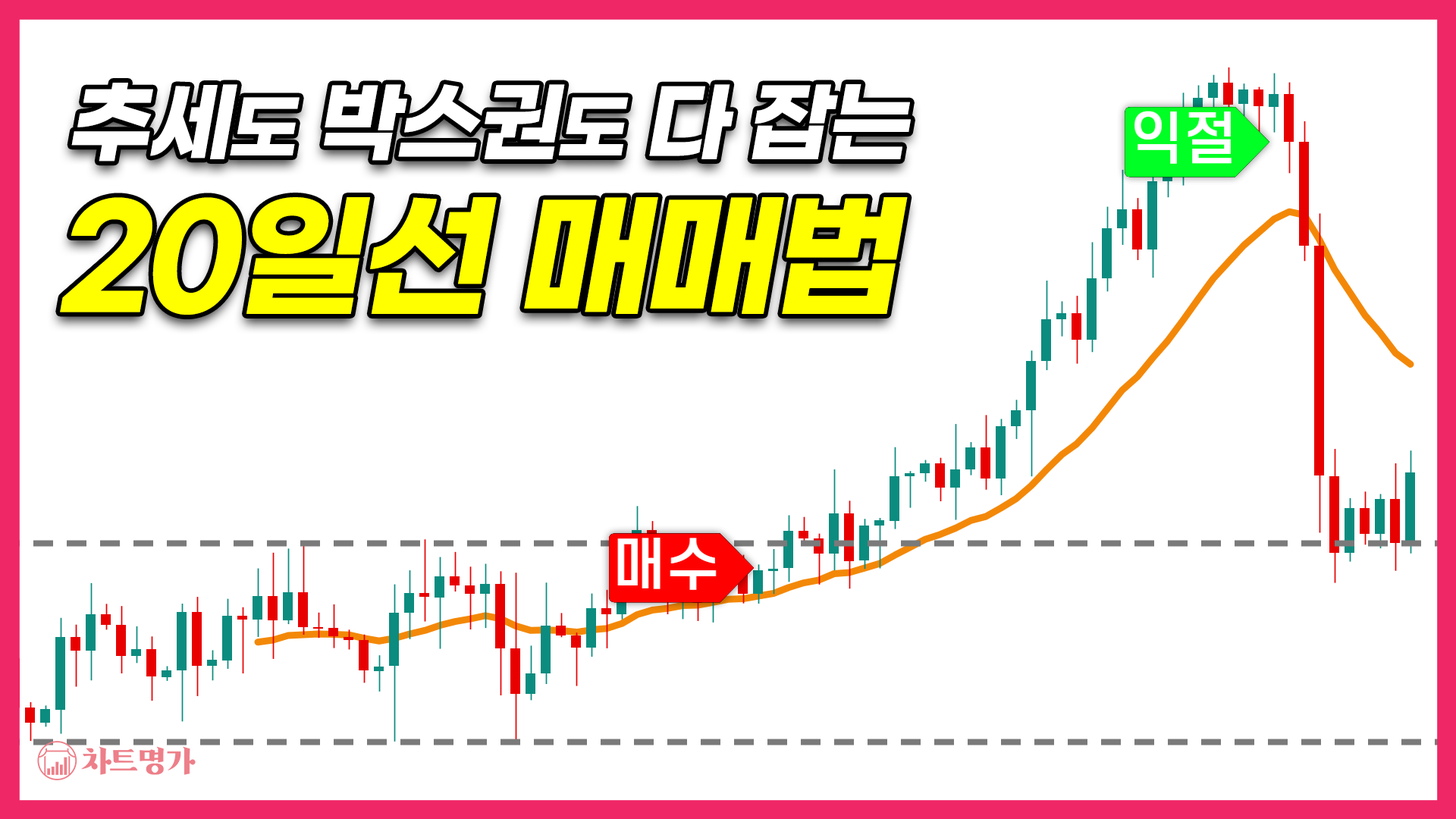
<style>
.page{position:relative;width:1456px;height:819px;background:#ffffff}
.page>*{position:absolute;margin:0}
.t1{font:87.3px "GmarketSansBold";letter-spacing:-0.04em;color:#ffffff;font-style:italic}
.t2{font:72.1px "GmarketSansBold";letter-spacing:-0.04em;color:#ffffff;font-style:italic}
.t3{font:136.6px "GmarketSansBold";letter-spacing:-0.04em;color:#ffff00;font-style:italic}
</style>
<div class="page">
<p class="t1" style="left:71px;top:83px;width:840px;height:79px">추세<span class="t2">도</span> 박스권<span class="t2">도</span> 다 잡는</p>
<p class="t3" style="left:60px;top:197px;width:848px;height:118px">20일선 매매법</p>
</div>
